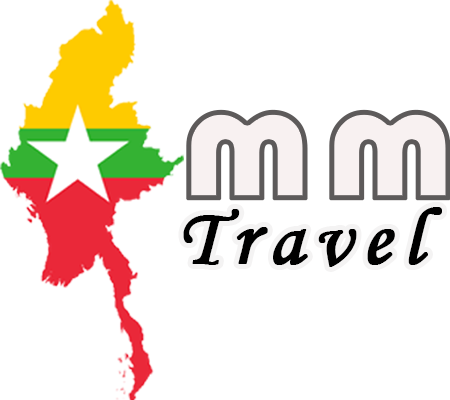
<style>
.page{position:relative;width:450px;height:400px;background:#ffffff}
.page>*{position:absolute;margin:0}
.t1{font:178.1px "Bauhaus93";color:#f8f1f1;font-weight:bold}
.t2{font:81.9px "MonotypeCorsiva";letter-spacing:0.12em;color:#000000;font-weight:bold}
</style>
<div class="page">
<p class="t1" style="left:186px;top:109px;width:265px;height:92px">mm</p>
<p class="t2" style="left:183px;top:207px;width:259px;height:60px">Travel</p>
</div>
